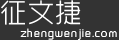
<style>
.page{position:relative;width:119px;height:40px;background:#333333}
.page>*{position:absolute;margin:0}
.t1{font:26px "MFYueHei_Noncommercial-Light";letter-spacing:0.04em;color:#ffffff}
.t2{font:12px "MFShangHei_Noncommercial-Light";letter-spacing:0.1em;color:#ffffff}
</style>
<div class="page">
<p class="t1" style="left:1px;top:0px;width:80px;height:25px">征文捷</p>
<p class="t2" style="left:20px;top:28px;width:97px;height:12px">zhengwenjie.com</p>
</div>
